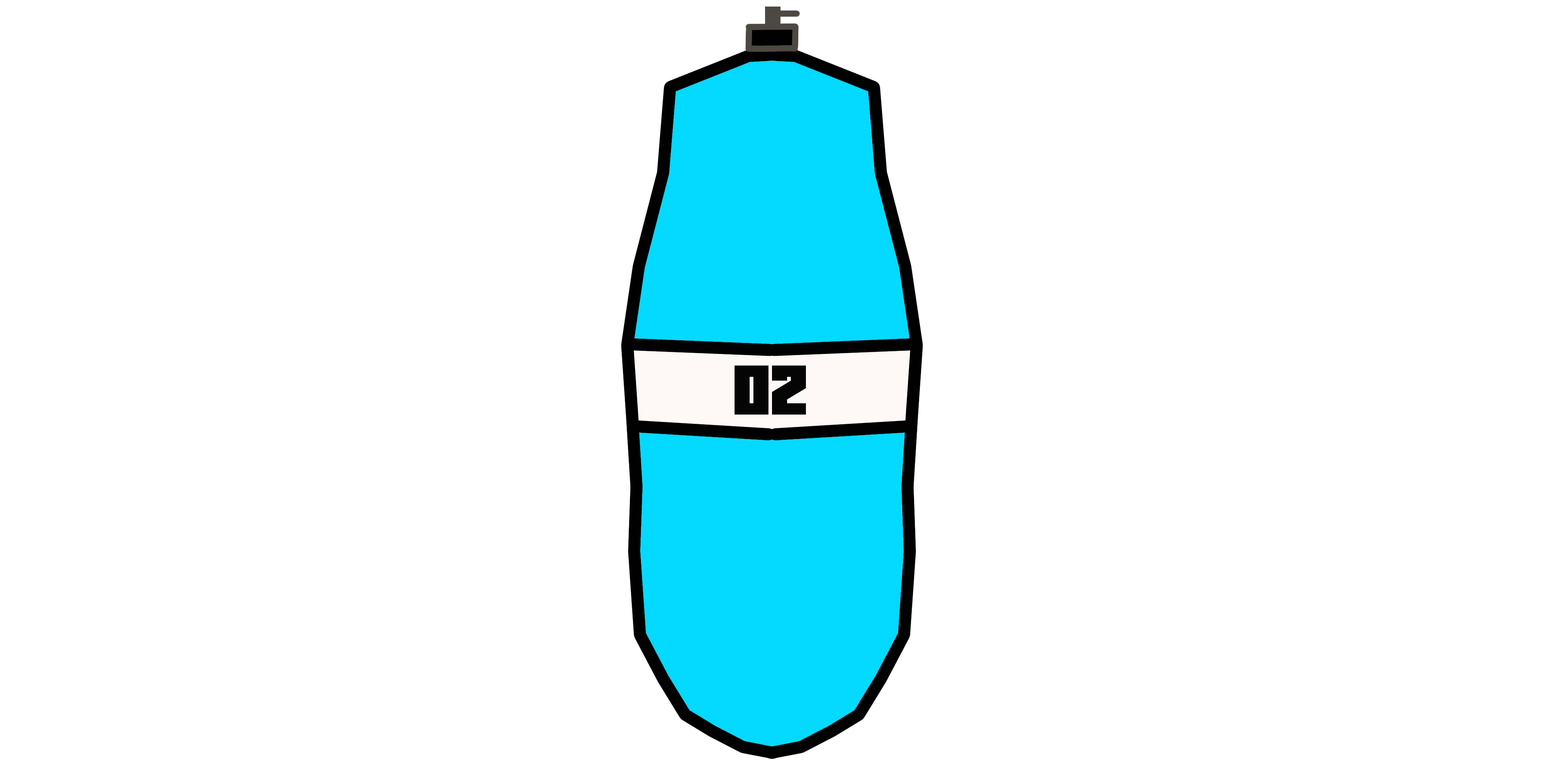
<style>
.page{position:relative;width:1544px;height:772px;background:#ffffff}
.page>*{position:absolute;margin:0}
.t1{font:77.2px "Robotronics";color:#050506}
</style>
<div class="page">
<p class="t1" style="left:735px;top:366px;width:71px;height:49px">O2</p>
</div>
